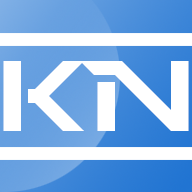
<style>
.page{position:relative;width:192px;height:192px;background:#ffffff}
.page>*{position:absolute;margin:0}
.t1{font:100px "PerfectDarkBRK)";letter-spacing:0.1em;color:#ffffff}
</style>
<div class="page">
<p class="t1" style="left:3px;top:61px;width:186px;height:70px">KN</p>
</div>
